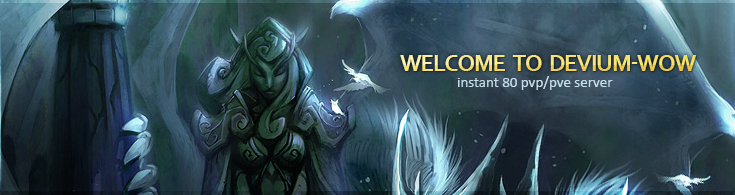
<style>
.page{position:relative;width:735px;height:195px}
.page>*{position:absolute;margin:0}
.t1{font:24px "Corbel-Bold";letter-spacing:-0.05em;text-transform:uppercase}
.t2{font:15px "Calibri";color:#c8deeb}
</style>
<div class="page">
<p class="t1" style="left:400px;top:55px;width:296px;height:16px">Welcome  to  Devium-wow</p>
<p class="t2" style="left:457px;top:76px;width:156px;height:14px">instant 80 pvp/pve server</p>
</div>
